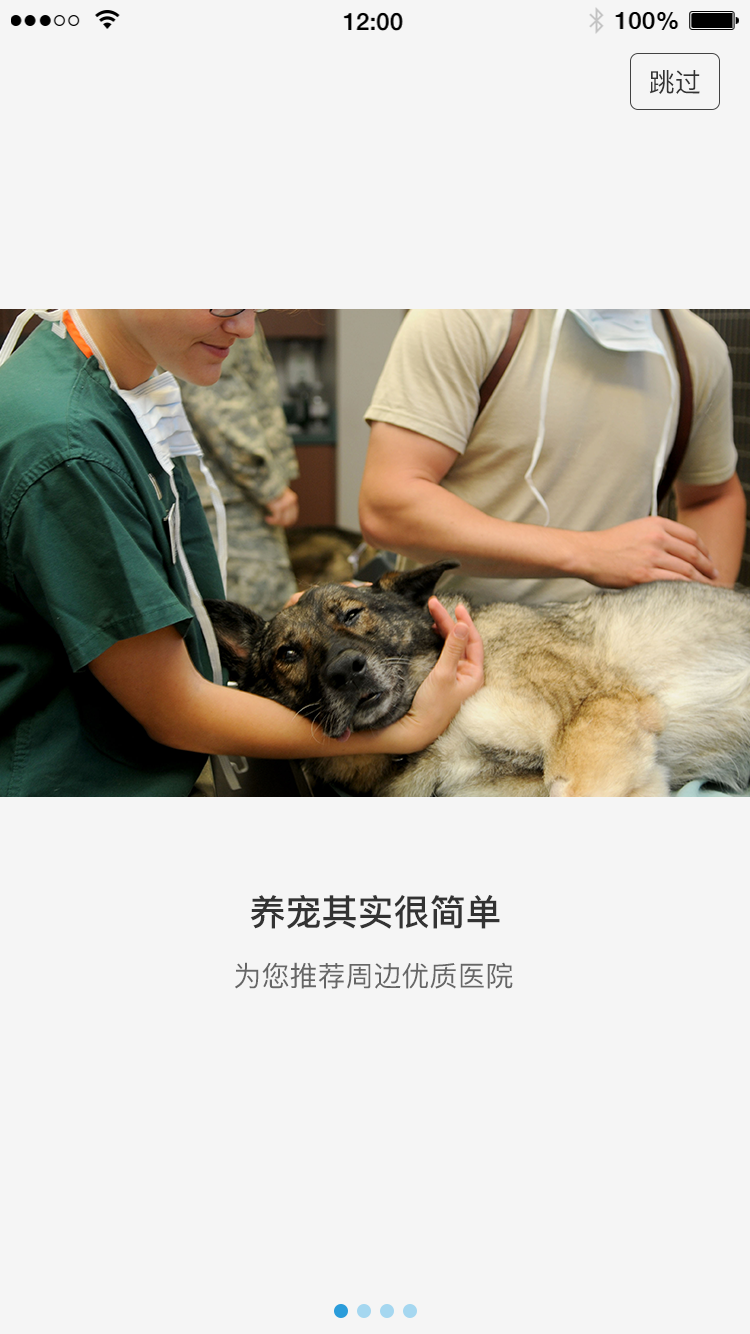
<style>
.page{position:relative;width:750px;height:1334px;background:#f5f5f5}
.page>*{position:absolute;margin:0}
.t1{font:26px "PingFangSC-Regular";color:#333333}
.t2{font:36px "PingFangSC-Medium";color:#333333}
.t3{font:28px "PingFangSC-Regular";color:#666666}
</style>
<div class="page">
<p class="t1" style="left:649px;top:70px;width:51px;height:24px">跳过</p>
<p class="t2" style="left:250px;top:895px;width:250px;height:34px">养宠其实很简单</p>
<p class="t3" style="left:235px;top:962px;width:278px;height:27px">为您推荐周边优质医院</p>
</div>
